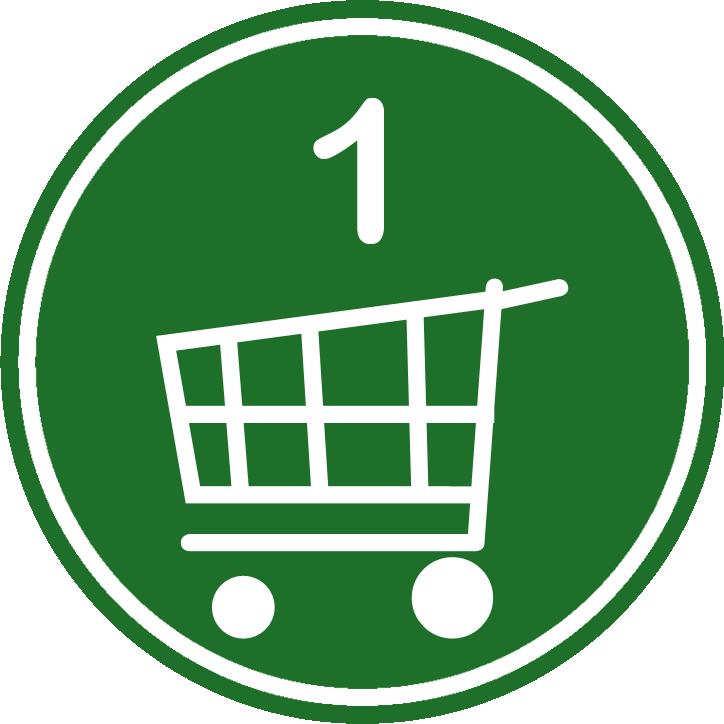
<style>
.page{position:relative;width:724px;height:724px;background:#1d6f2a}
.page>*{position:absolute;margin:0}
.t1{font:200px "ArialRoundedMTBold";color:#ffffff}
</style>
<div class="page">
<p class="t1" style="left:313px;top:97px;width:71px;height:147px">1</p>
</div>
